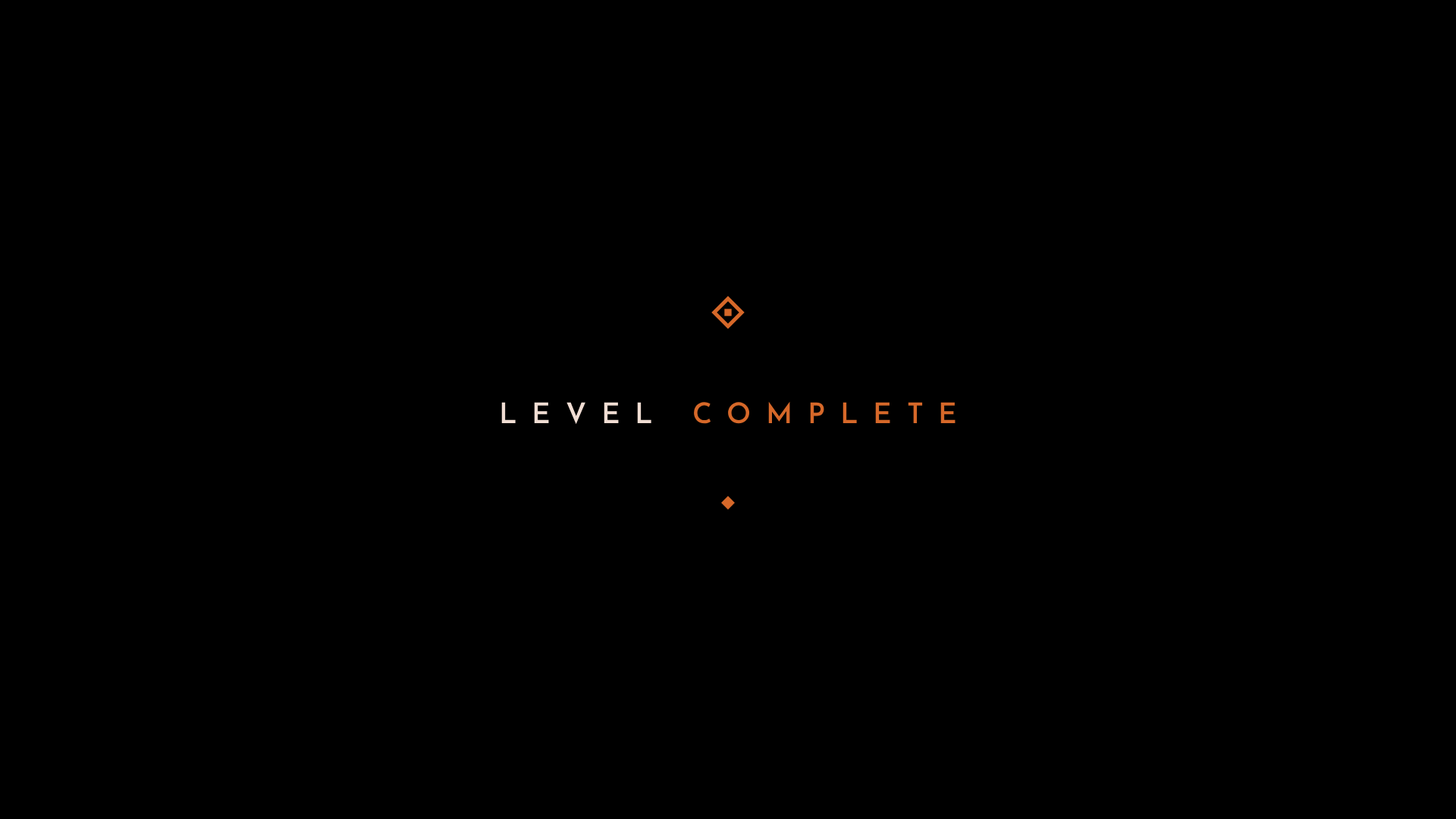
<style>
.page{position:relative;width:1456px;height:819px;background:#000000}
.page>*{position:absolute;margin:0}
.t1{font:28.5px "JosefinSansRoman-SemiBold";letter-spacing:0.525em;color:#d66829}
.t2{font:28.5px "JosefinSansRoman-SemiBold";letter-spacing:0.525em;color:#f0ddd3}
</style>
<div class="page">
<p class="t1" style="left:501px;top:401px;width:454px;height:24px"><span class="t2">LEVEL </span>COMPLETE</p>
</div>
